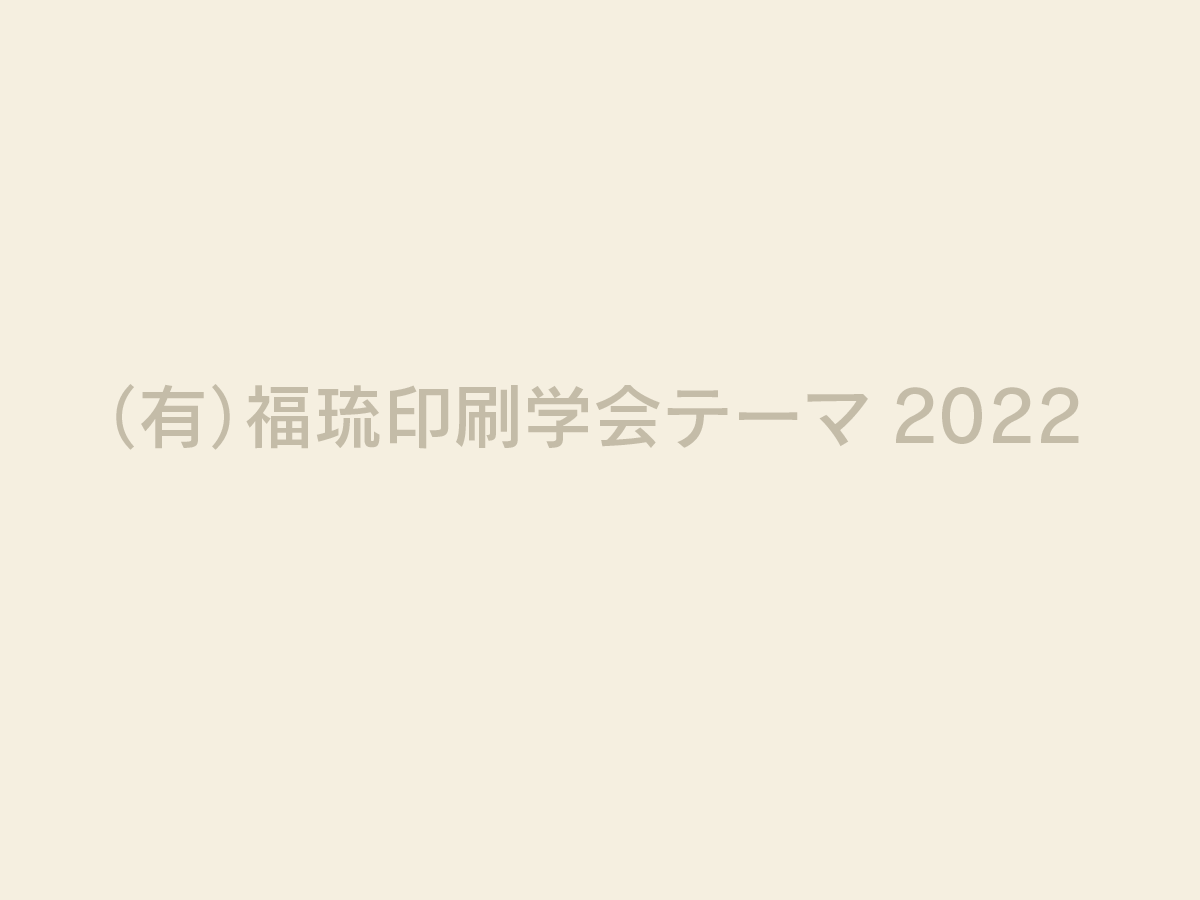
<style>
.page{position:relative;width:1200px;height:900px;background:#f5efe0}
.page>*{position:absolute;margin:0}
.t1{font:70px "RodinProN-DB";color:#c4bca8}
</style>
<div class="page">
<p class="t1" style="left:116px;top:384px;width:963px;height:66px">（有）福琉印刷学会テーマ2022</p>
</div>
